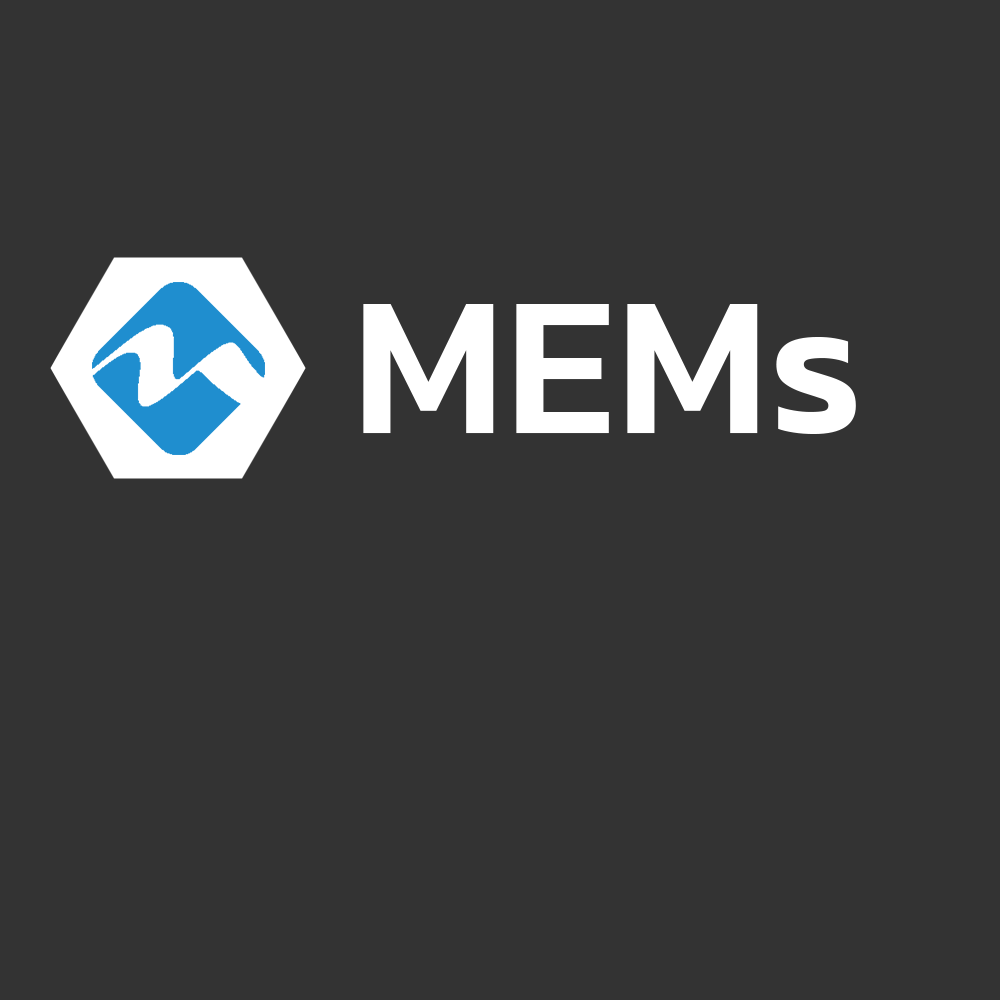
<style>
.page{position:relative;width:1000px;height:1000px;background:#333333}
.page>*{position:absolute;margin:0}
.t1{font:200px "Kanit-Medium";color:#ffffff}
</style>
<div class="page">
<p class="t1" style="left:363px;top:304px;width:493px;height:130px">MEMs</p>
</div>
